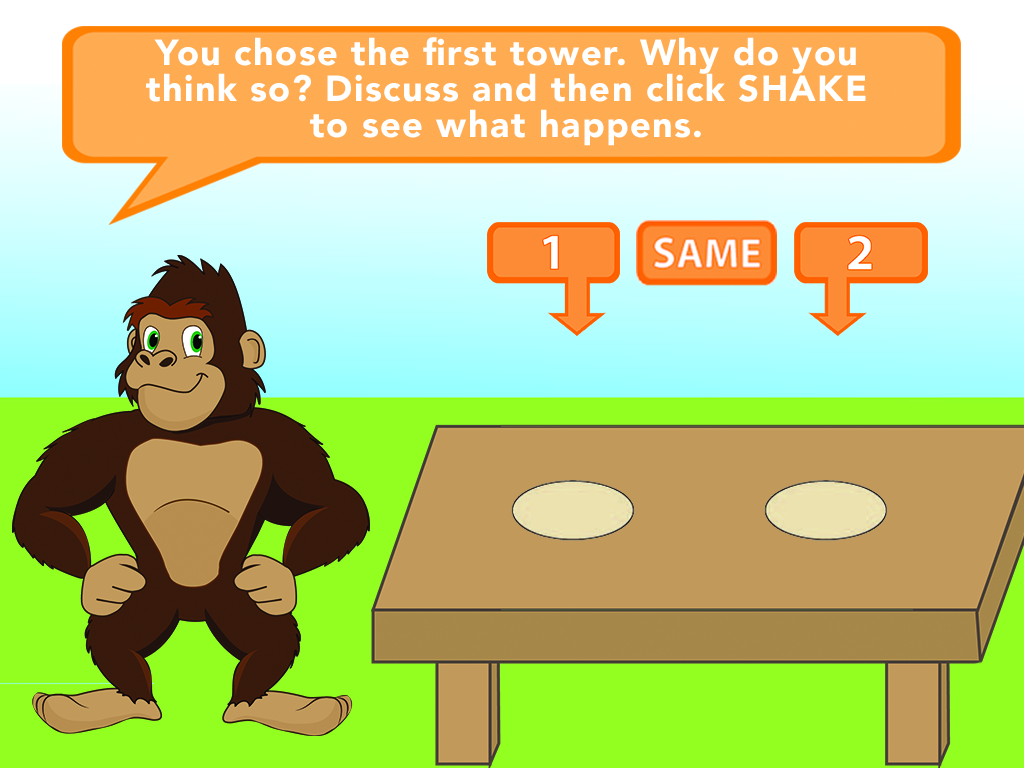
<style>
.page{position:relative;width:1024px;height:768px}
.page>*{position:absolute;margin:0}
.t1{font:36px/36px "Avenir-Black";letter-spacing:0.04em;color:#ffffff}
</style>
<div class="page">
<p class="t1" style="left:146px;top:37px;width:720px;height:109px;text-align:center">You chose the first tower. Why do you<br>think so? Discuss and then click SHAKE<br>to see what happens.</p>
</div>
